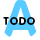
<style>
.page{position:relative;width:40px;height:40px;background:#ffffff}
.page>*{position:absolute;margin:0}
.t1{font:52.5px "VAGRoundedLTCYR-Bold";letter-spacing:0.1em;color:#57cbff;text-transform:uppercase}
.t2{font:10.9px "VAGRoundedLTCYR-Bold";letter-spacing:0.1em;color:#000000;text-transform:uppercase}
</style>
<div class="page">
<p class="t1" style="left:4px;top:0px;width:33px;height:37px">A</p>
<p class="t2" style="left:3px;top:17px;width:32px;height:8px">TODO</p>
</div>
